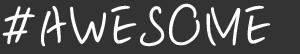
<style>
.page{position:relative;width:300px;height:54px;background:#333333}
.page>*{position:absolute;margin:0}
.t1{font:58.3px "THEFACESHOP";color:#ffffff}
</style>
<div class="page">
<p class="t1" style="left:2px;top:3px;width:269px;height:44px">#AWESOME</p>
</div>
